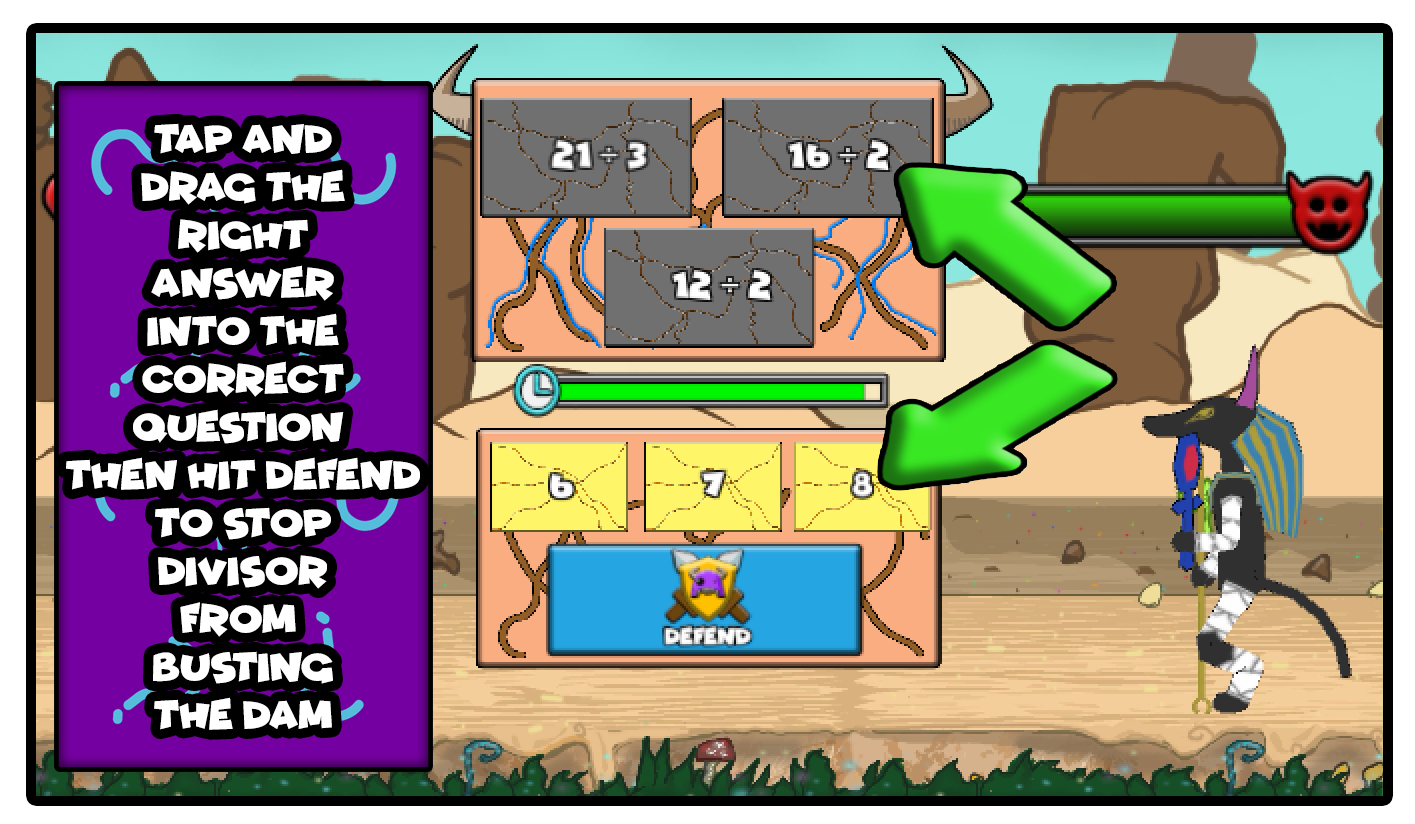
<style>
.page{position:relative;width:1415px;height:824px}
.page>*{position:absolute;margin:0}
.t1{font:40px "Funhouse";color:#ffffff}
</style>
<div class="page">
<p class="t1" style="left:66px;top:123px;width:354px;height:607px;text-align:center">tap and<br>drag the<br>right<br>answer<br>into the<br>correct<br>question <br>then hit defend<br>to stop<br>divisor<br>from <br>busting<br>the dam</p>
</div>
